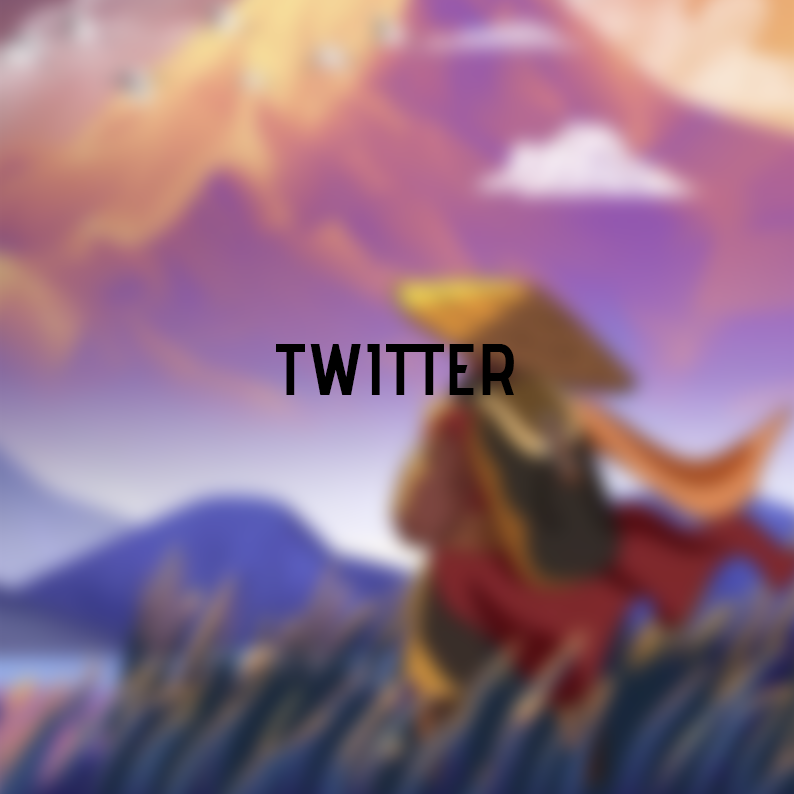
<style>
.page{position:relative;width:794px;height:794px}
.page>*{position:absolute;margin:0}
.t1{font:72px "AdventPro-Bold";color:#000000}
</style>
<div class="page">
<p class="t1" style="left:276px;top:344px;width:238px;height:51px">TWITTER</p>
</div>
